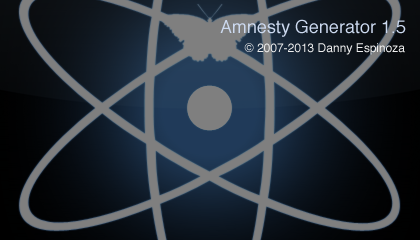
<style>
.page{position:relative;width:420px;height:240px}
.page>*{position:absolute;margin:0}
.t1{font:18px "Helvetica";color:#ccd9ef}
.t2{font:12px "Helvetica";color:#efefef}
</style>
<div class="page">
<p class="t1" style="left:220px;top:19px;width:186px;height:18px">Amnesty Generator 1.5</p>
<p class="t2" style="left:244px;top:43px;width:161px;height:12px">© 2007-2013 Danny Espinoza</p>
</div>
